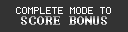
<style>
.page{position:relative;width:128px;height:32px;background:#333333}
.page>*{position:absolute;margin:0}
.t1{font:10px "Terminal";color:#ffffff}
.t2{font:12px "Terminal"}
</style>
<div class="page">
<p class="t1" style="left:16px;top:7px;width:95px;height:7px">COMPLETE MODE TO</p>
<p class="t2" style="left:21px;top:16px;width:86px;height:9px">SCORE BONUS</p>
</div>
